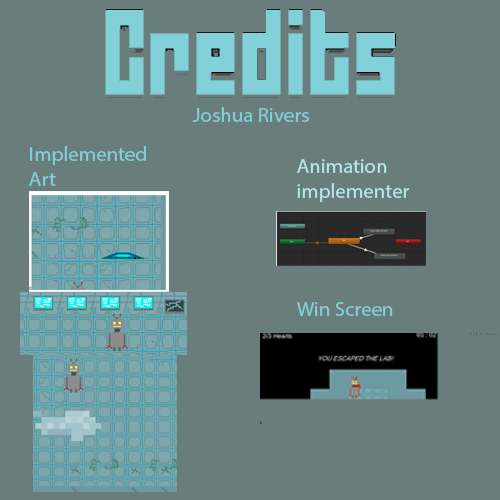
<style>
.page{position:relative;width:500px;height:500px;background:#697d7d}
.page>*{position:absolute;margin:0}
.t1{font:20.8px "MyriadPro-Regular";color:#82d0d8}
.t2{font:20.8px "MyriadPro-Regular";color:#b5e7eb}
</style>
<div class="page">
<p class="t1" style="left:192px;top:107px;width:117px;height:15px">Joshua Rivers</p>
<p class="t1" style="left:29px;top:146px;width:117px;height:40px">Implemented Art</p>
<p class="t2" style="left:297px;top:159px;width:113px;height:43px">Animation implementer</p>
<p class="t1" style="left:297px;top:302px;width:96px;height:14px">Win Screen</p>
</div>
